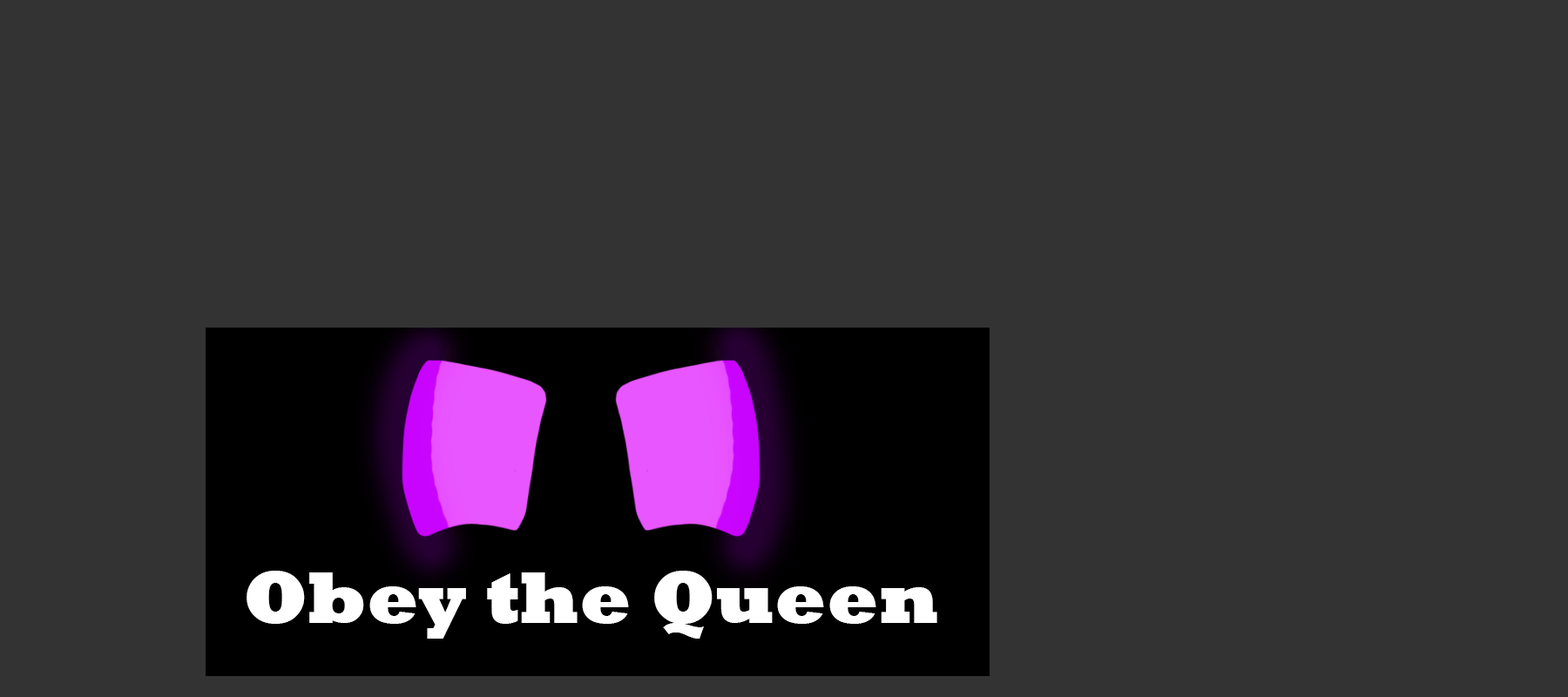
<style>
.page{position:relative;width:1568px;height:697px;background:#333333}
.page>*{position:absolute;margin:0}
.t1{font:74.9px "Rockwell-ExtraBold";color:#ffffff}
</style>
<div class="page">
<p class="t1" style="left:247px;top:571px;width:690px;height:68px">Obey the Queen</p>
</div>
